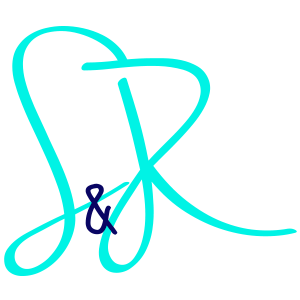
<style>
.page{position:relative;width:300px;height:300px;background:#ffffff}
.page>*{position:absolute;margin:0}
.t1{font:225px "NellaSueDemo";color:#00f3e5}
.t2{font:108.3px "MoonFlowerBold";color:#090563}
</style>
<div class="page">
<p class="t1" style="left:4px;top:26px;width:126px;height:250px">S</p>
<p class="t1" style="left:81px;top:58px;width:216px;height:215px;rotate:-23deg">R</p>
<p class="t2" style="left:85px;top:183px;width:33px;height:52px">&amp;</p>
</div>
